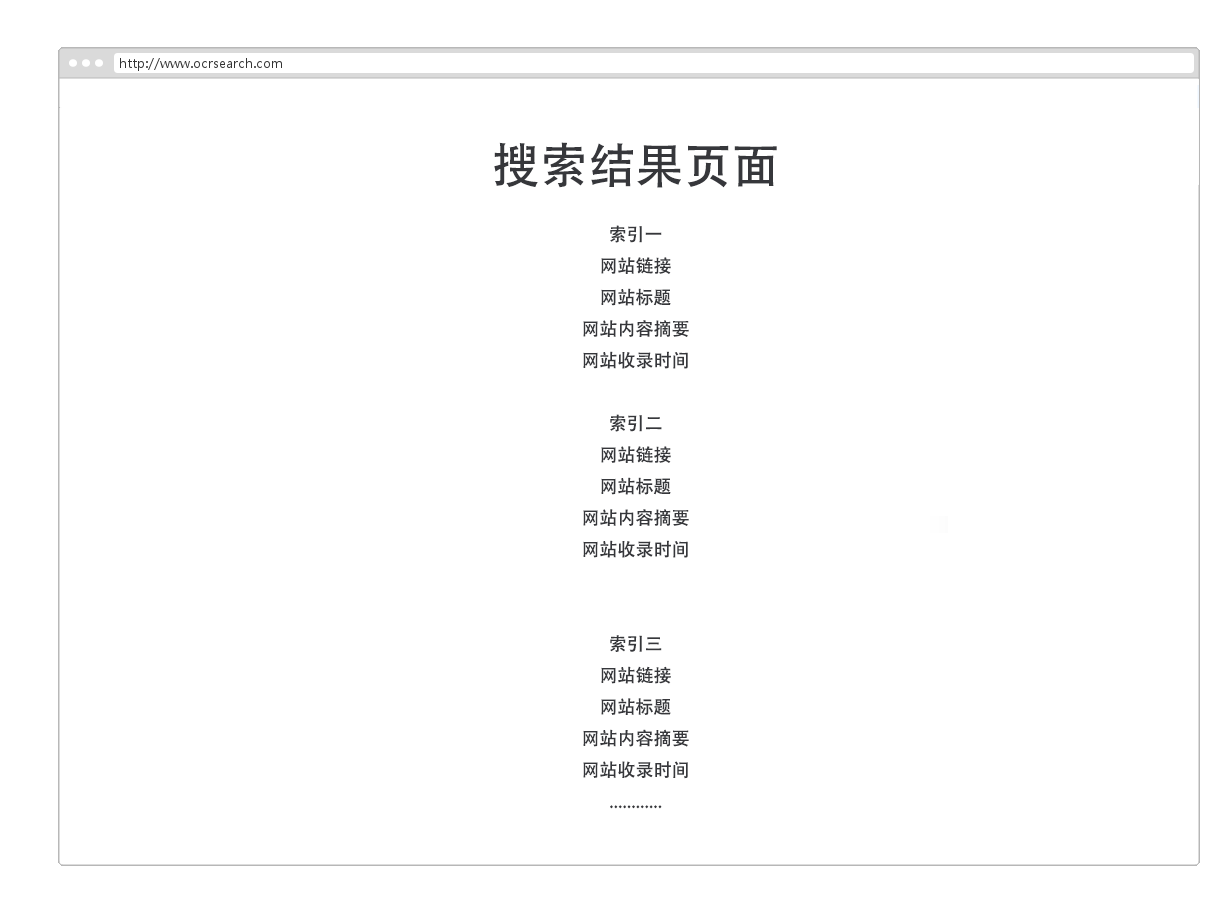
<style>
.page{position:relative;width:1231px;height:897px;background:#ffffff}
.page>*{position:absolute;margin:0}
.t1{font:18px "AdobeHeitiStd-Regular";color:#36373b}
.t2{font:48px "AdobeHeitiStd-Regular";color:#36373b}
</style>
<div class="page">
<p class="t1" style="left:494px;top:142px;width:283px;height:667px;text-align:center"><span class="t2">搜索结果页面</span><br>索引一<br>网站链接<br>网站标题<br>网站内容摘要<br>网站收录时间<br><br>索引二<br>网站链接<br>网站标题<br>网站内容摘要<br>网站收录时间<br><br><br>索引三<br>网站链接<br>网站标题<br>网站内容摘要<br>网站收录时间<br>............</p>
</div>
